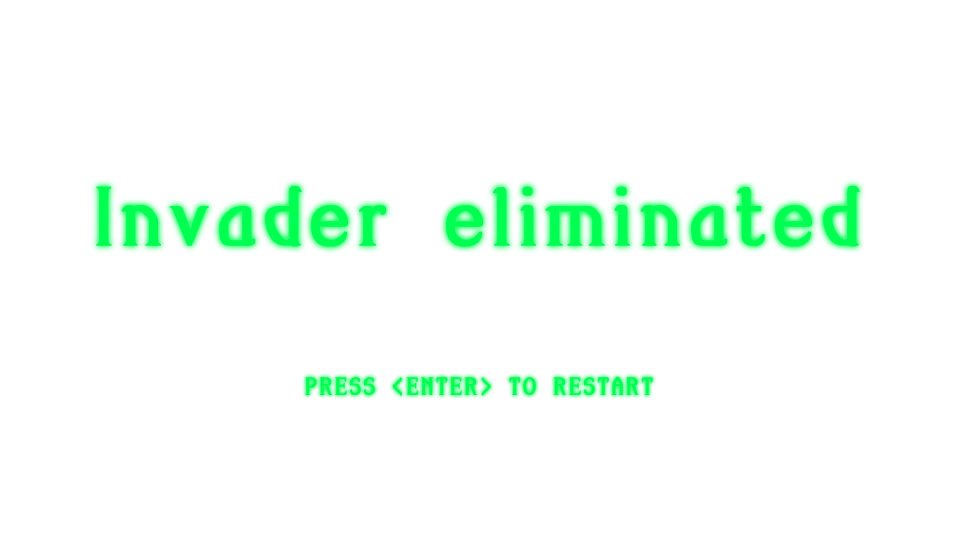
<style>
.page{position:relative;width:960px;height:540px;background:#ffffff}
.page>*{position:absolute;margin:0}
.t1{font:100px "AmiR-HM";letter-spacing:0.06em;color:#00ff50;font-weight:bold}
.t2{font:30px "AmiR-HM";letter-spacing:0.06em;color:#00ff50;font-weight:bold}
</style>
<div class="page">
<p class="t1" style="left:96px;top:186px;width:764px;height:61px">Invader eliminated</p>
<p class="t2" style="left:305px;top:376px;width:348px;height:20px">PRESS &lt;ENTER&gt; TO RESTART</p>
</div>
